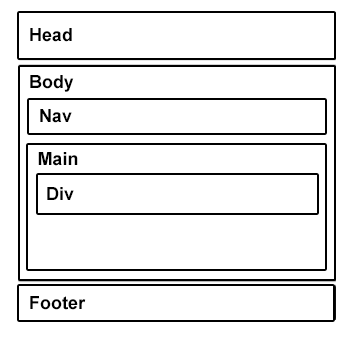
<style>
.page{position:relative;width:352px;height:341px;background:#ffffff}
.page>*{position:absolute;margin:0}
.t1{font:18px "Arial-BoldMT";color:#000000}
</style>
<div class="page">
<p class="t1" style="left:30px;top:28px;width:42px;height:14px">Head</p>
<p class="t1" style="left:30px;top:75px;width:44px;height:17px">Body</p>
<p class="t1" style="left:40px;top:109px;width:32px;height:14px">Nav</p>
<p class="t1" style="left:38px;top:152px;width:40px;height:14px">Main</p>
<p class="t1" style="left:47px;top:187px;width:27px;height:13px">Div</p>
<p class="t1" style="left:30px;top:296px;width:56px;height:14px">Footer</p>
</div>
